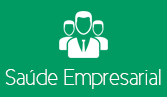
<style>
.page{position:relative;width:167px;height:97px;background:#009b62}
.page>*{position:absolute;margin:0}
.t1{font:22.7px "CicleFina";color:#ffffff}
</style>
<div class="page">
<p class="t1" style="left:5px;top:69px;width:156px;height:20px">Saúde Empresarial</p>
</div>
